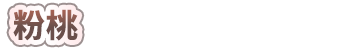
<style>
.page{position:relative;width:360px;height:50px;background:#ffffff}
.page>*{position:absolute;margin:0}
.t1{font:32px "SourceHanSansSC-Bold";color:#73534d;font-weight:bold}
</style>
<div class="page">
<p class="t1" style="left:13px;top:9px;width:65px;height:32px">粉桃</p>
</div>
